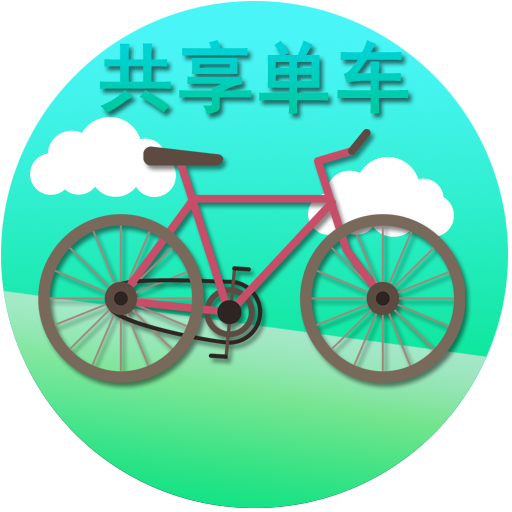
<style>
.page{position:relative;width:512px;height:512px;background:#ffffff}
.page>*{position:absolute;margin:0}
.t1{font:77px "SimHei";color:#00cfbe;font-weight:bold}
</style>
<div class="page">
<p class="t1" style="left:100px;top:40px;width:309px;height:74px">共享单车</p>
</div>
